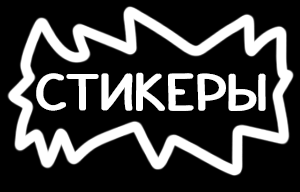
<style>
.page{position:relative;width:300px;height:192px;background:#000000}
.page>*{position:absolute;margin:0}
.t1{font:50px "HQYSaversText";letter-spacing:0.02em;color:#ffffff}
</style>
<div class="page">
<p class="t1" style="left:36px;top:72px;width:228px;height:39px">СТИКЕРЫ</p>
<p class="t1" style="left:38px;top:72px;width:228px;height:39px">СТИКЕРЫ</p>
</div>
